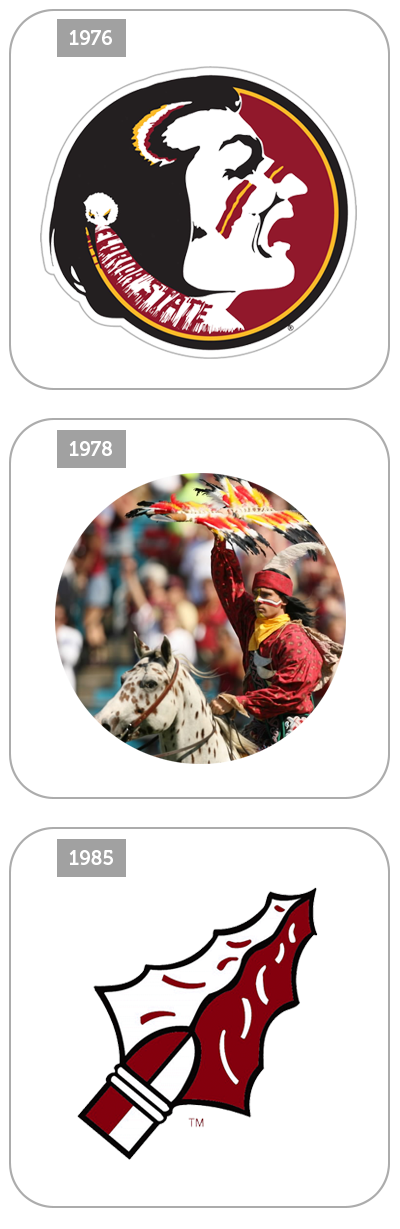
<style>
.page{position:relative;width:400px;height:1229px;background:#ffffff}
.page>*{position:absolute;margin:0}
.t1{font:20px "Museo-700";color:#ffffff}
</style>
<div class="page">
<p class="t1" style="left:69px;top:30px;width:43px;height:15px">1976</p>
<p class="t1" style="left:69px;top:441px;width:43px;height:15px">1978</p>
<p class="t1" style="left:69px;top:850px;width:44px;height:15px">1985</p>
</div>
